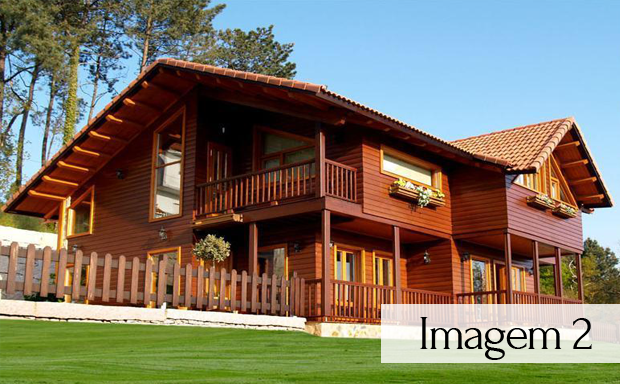
<style>
.page{position:relative;width:620px;height:384px}
.page>*{position:absolute;margin:0}
.t1{font:48.9px "Forum";letter-spacing:-0.05em;color:#000000}
</style>
<div class="page">
<p class="t1" style="left:420px;top:317px;width:172px;height:43px">Imagem 2</p>
</div>
